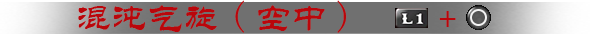
<style>
.page{position:relative;width:590px;height:34px;background:#707070}
.page>*{position:absolute;margin:0}
.t1{font:36px "STLiti";color:#ba060b}
.t2{font:36px "FangSong";color:#ba060b}
</style>
<div class="page">
<p class="t1" style="left:78px;top:0px;width:378px;height:33px">混沌气旋<span class="t2">(</span>空中<span class="t2">)</span>   +</p>
</div>
